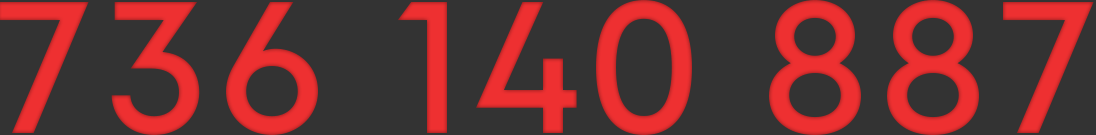
<style>
.page{position:relative;width:1096px;height:135px;background:#333333}
.page>*{position:absolute;margin:0}
.t1{font:186.5px "Alcyone-Medium";color:#ee3031}
</style>
<div class="page">
<p class="t1" style="left:0px;top:0px;width:1094px;height:136px">736 140 887</p>
</div>
